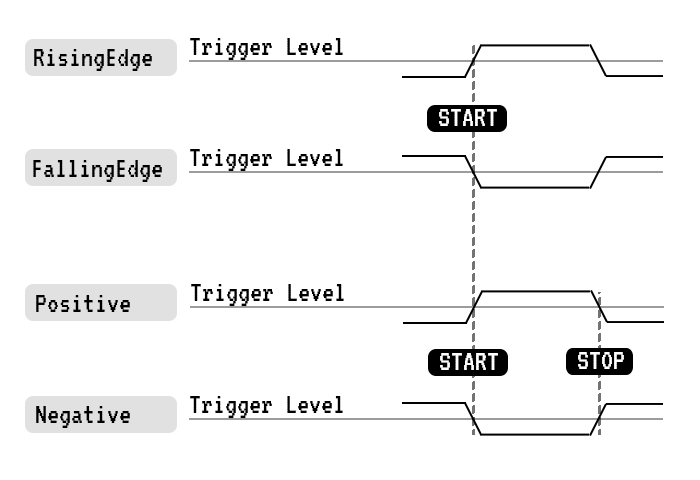
<style>
.page{position:relative;width:700px;height:480px;background:#ffffff}
.page>*{position:absolute;margin:0}
.t1{font:30px "VT323-Regular";color:#000000}
.t2{font:30px "VT323-Regular";color:#ffffff}
</style>
<div class="page">
<p class="t1" style="left:190px;top:38px;width:153px;height:22px">Trigger Level</p>
<p class="t1" style="left:34px;top:49px;width:118px;height:22px">RisingEdge</p>
<p class="t2" style="left:439px;top:109px;width:58px;height:17px">START</p>
<p class="t1" style="left:190px;top:149px;width:153px;height:22px">Trigger Level</p>
<p class="t1" style="left:33px;top:160px;width:129px;height:22px">FallingEdge</p>
<p class="t1" style="left:191px;top:284px;width:153px;height:22px">Trigger Level</p>
<p class="t1" style="left:36px;top:295px;width:94px;height:17px">Positive</p>
<p class="t2" style="left:440px;top:353px;width:58px;height:17px">START</p>
<p class="t2" style="left:578px;top:352px;width:46px;height:17px">STOP</p>
<p class="t1" style="left:190px;top:396px;width:153px;height:22px">Trigger Level</p>
<p class="t1" style="left:36px;top:406px;width:94px;height:22px">Negative</p>
</div>
